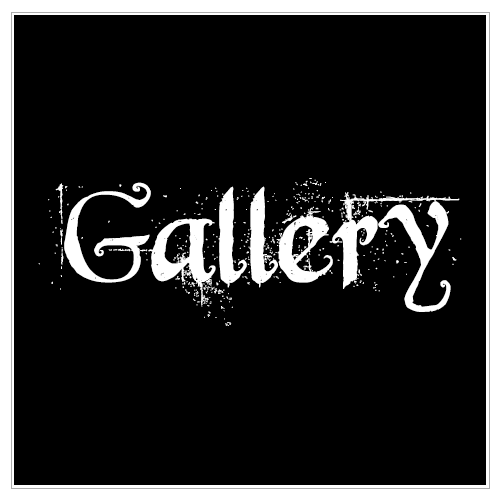
<style>
.page{position:relative;width:500px;height:500px;background:#000000}
.page>*{position:absolute;margin:0}
.t1{font:141px "BeyondWonderland";color:#ffffff}
</style>
<div class="page">
<p class="t1" style="left:38px;top:178px;width:424px;height:148px">Gallery</p>
</div>
